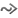
<style>
.page{position:relative;width:18px;height:18px;background:#ffffff}
.page>*{position:absolute;margin:0}
.t1{font:22.1px "Consolas";scale:1.05 1}
.t2{font:20.3px "Consolas";color:#666666;scale:1.07 1}
</style>
<div class="page">
<p class="t1" style="left:0px;top:6px;width:12px;height:6px">~</p>
<p class="t2" style="left:9px;top:3px;width:9px;height:12px">&gt;</p>
</div>
